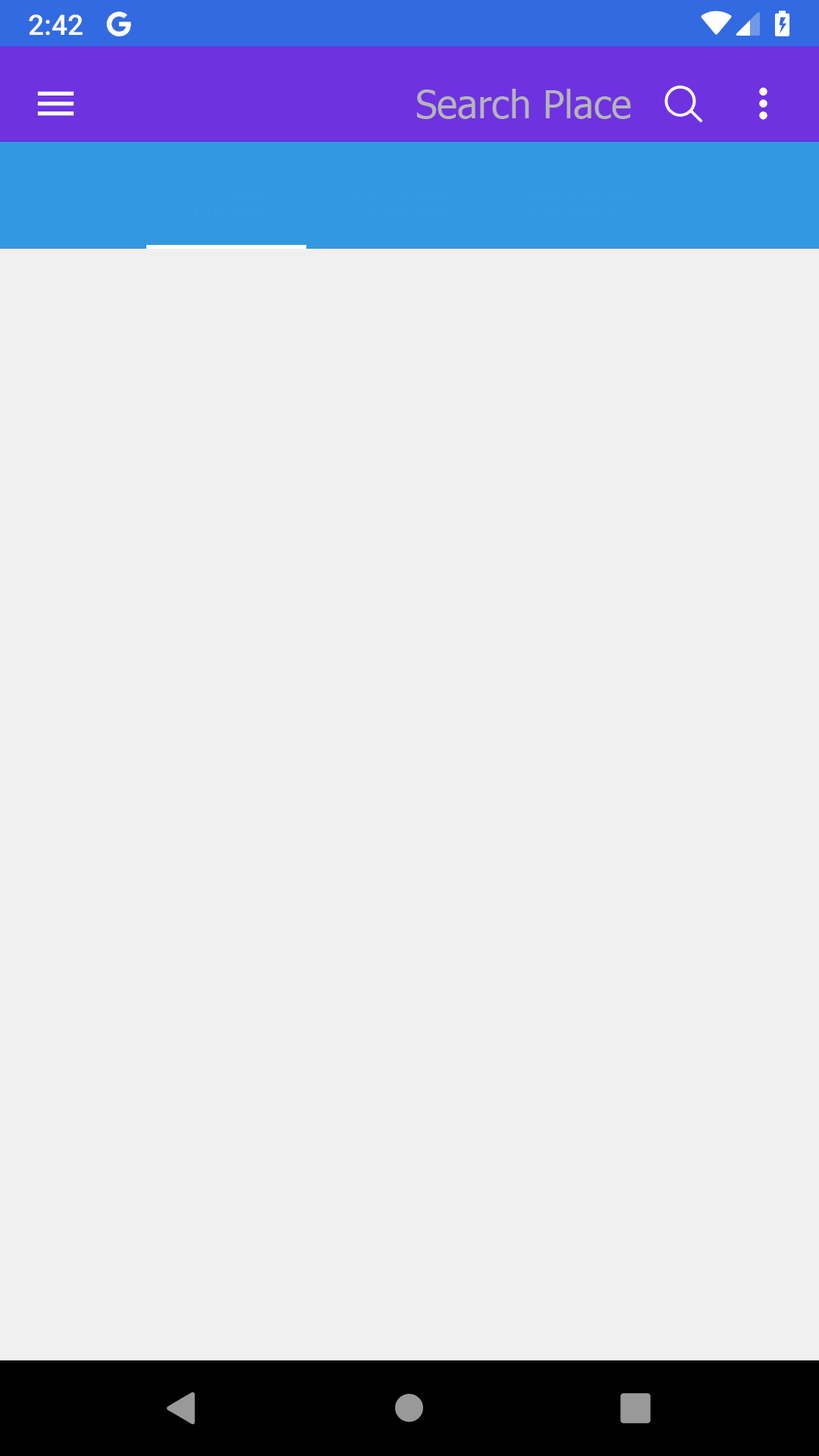
<style>
.page{position:relative;width:819px;height:1456px;background:#f0f0f0}
.page>*{position:absolute;margin:0}
.t1{font:38.7px "Tahoma";color:#b5b5b5}
</style>
<div class="page">
<p class="t1" style="left:416px;top:89px;width:215px;height:30px">Search Place</p>
</div>
